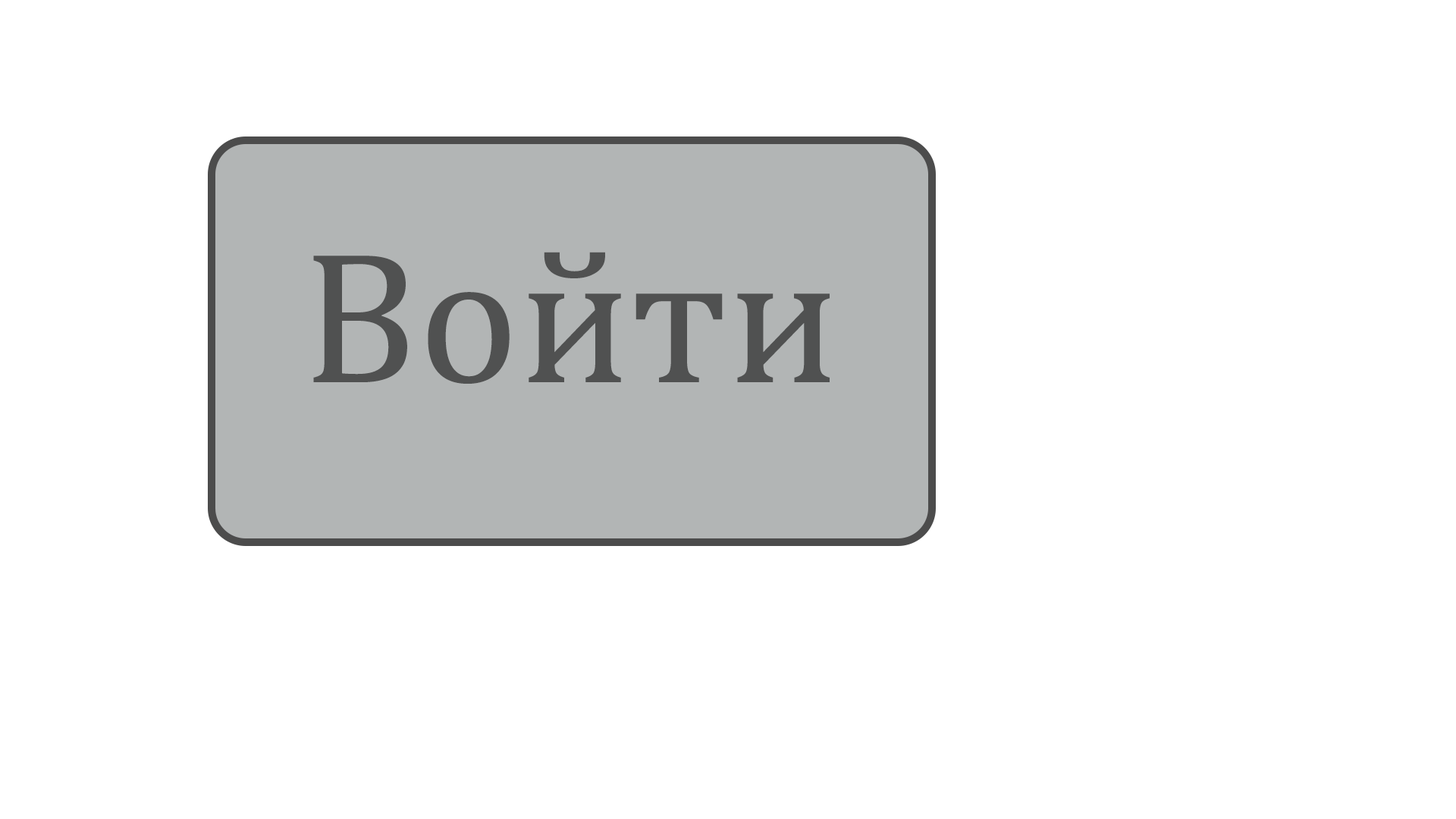
<style>
.page{position:relative;width:1456px;height:819px;background:#ffffff}
.page>*{position:absolute;margin:0}
.t1{font:189.6px "CambriaMath";color:#505151}
</style>
<div class="page">
<p class="t1" style="left:313px;top:252px;width:517px;height:132px">Войти</p>
</div>
